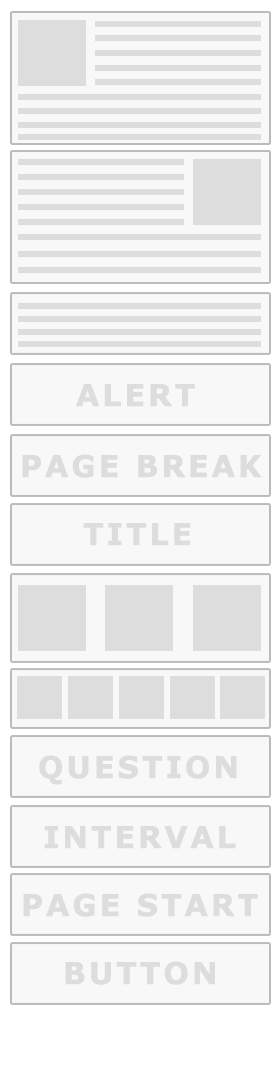
<style>
.page{position:relative;width:280px;height:1080px;background:#f8f8f8}
.page>*{position:absolute;margin:0}
.t1{font:30px "Verdana-Bold";letter-spacing:0.075em;color:#dddddd;font-weight:bold}
</style>
<div class="page">
<p class="t1" style="left:76px;top:384px;width:119px;height:23px">ALERT</p>
<p class="t1" style="left:22px;top:454px;width:240px;height:24px">PAGE BREAK</p>
<p class="t1" style="left:83px;top:523px;width:108px;height:23px">TITLE</p>
<p class="t1" style="left:39px;top:755px;width:198px;height:30px">QUESTION</p>
<p class="t1" style="left:44px;top:826px;width:192px;height:23px">INTERVAL</p>
<p class="t1" style="left:23px;top:893px;width:235px;height:24px">PAGE START</p>
<p class="t1" style="left:65px;top:961px;width:150px;height:24px">BUTTON</p>
</div>
